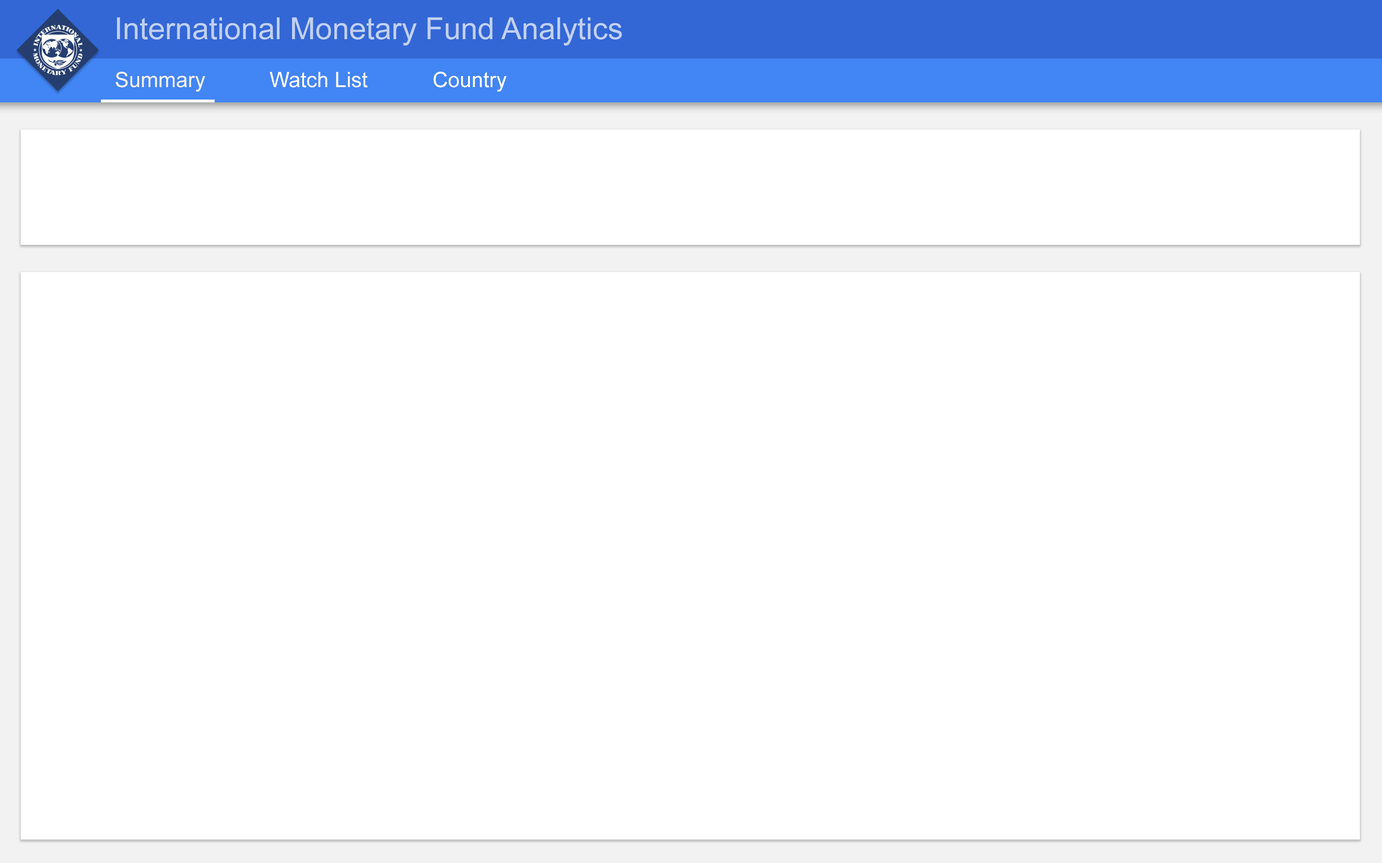
<style>
.page{position:relative;width:1382px;height:863px;background:#ffffff}
.page>*{position:absolute;margin:0}
.t1{font:30.4px "ArialMT";color:#c1d1f3}
.t2{font:21.2px "ArialMT";color:#f2f2f2}
.t3{font:21.2px "ArialMT";color:#ffffff}
</style>
<div class="page">
<p class="t1" style="left:117px;top:17px;width:505px;height:29px">International Monetary Fund Analytics</p>
<p class="t2" style="left:116px;top:71px;width:90px;height:21px">Summary</p>
<p class="t3" style="left:270px;top:72px;width:98px;height:16px">Watch List</p>
<p class="t3" style="left:434px;top:71px;width:73px;height:21px">Country</p>
</div>
